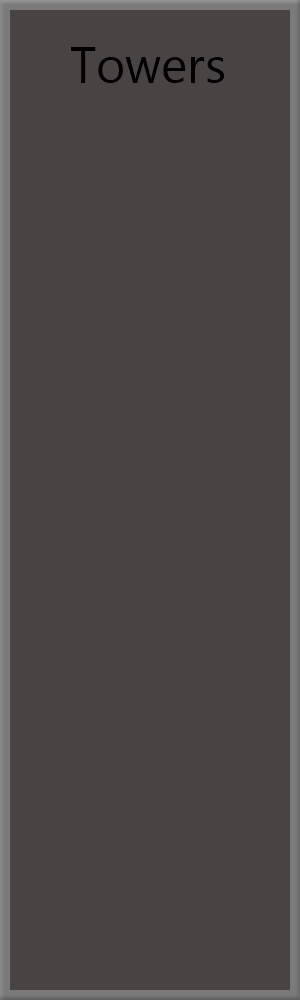
<style>
.page{position:relative;width:300px;height:1000px;background:#484444}
.page>*{position:absolute;margin:0}
.t1{font:50px "MicrosoftNewTaiLue";color:#000000}
</style>
<div class="page">
<p class="t1" style="left:71px;top:47px;width:154px;height:36px">Towers</p>
</div>
